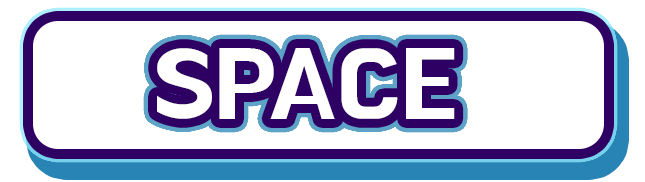
<style>
.page{position:relative;width:645px;height:182px;background:#ffffff}
.page>*{position:absolute;margin:0}
.t1{font:97.1px "BMHANNA11yrsold";color:#ffffff}
</style>
<div class="page">
<p class="t1" style="left:157px;top:48px;width:298px;height:71px">SPACE</p>
</div>
